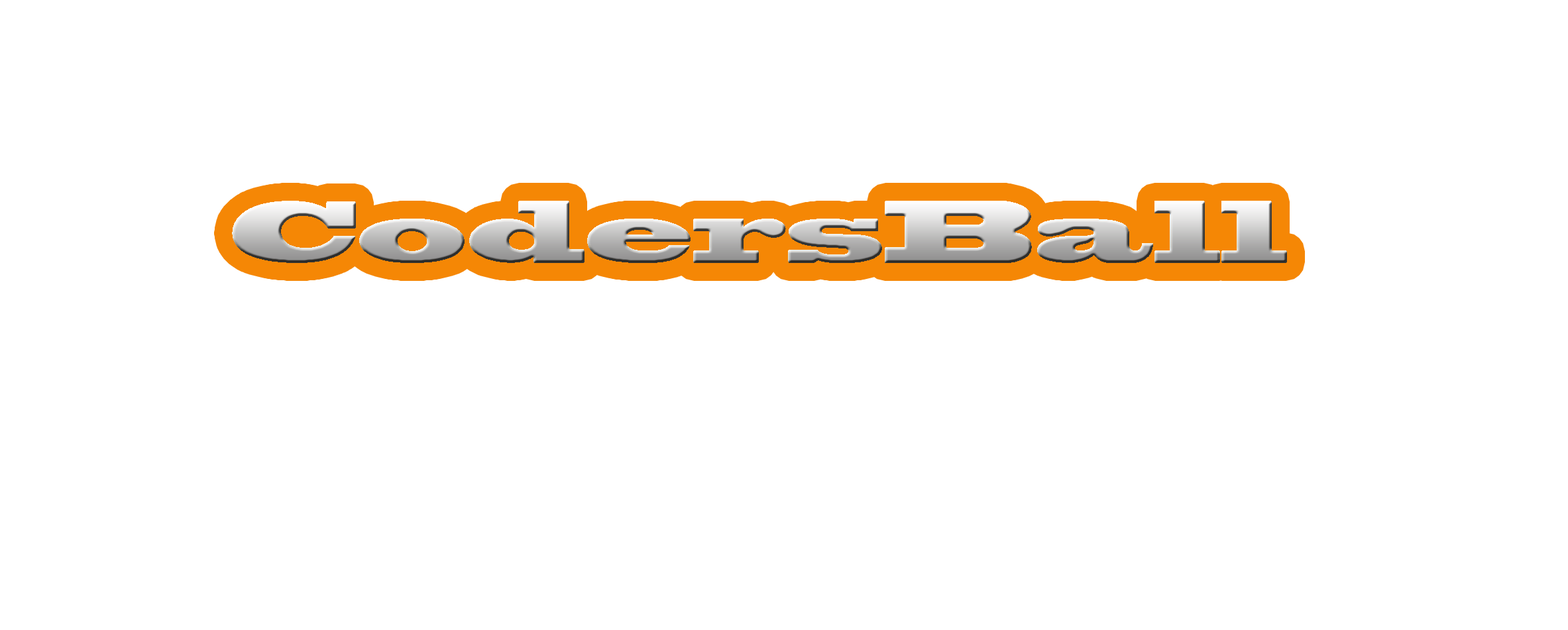
<style>
.page{position:relative;width:1568px;height:630px;background:#ffffff}
.page>*{position:absolute;margin:0}
.t1{font:82.8px "BlackoakStd";letter-spacing:-0.025em}
</style>
<div class="page">
<p class="t1" style="left:232px;top:201px;width:1055px;height:62px">CodersBall</p>
</div>
